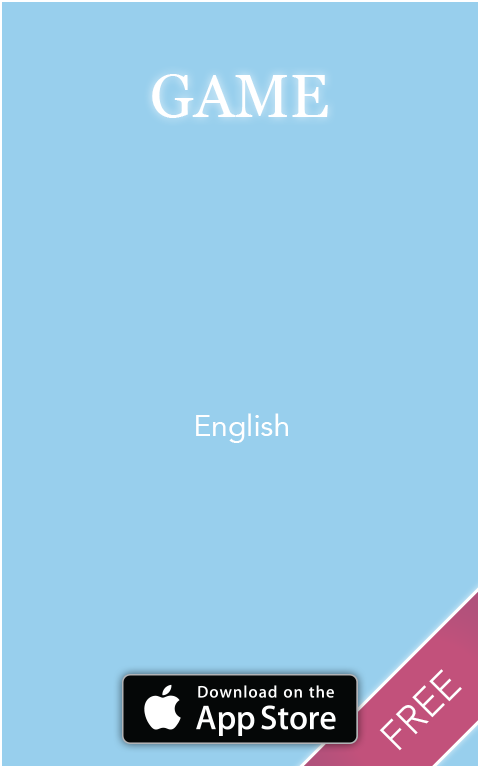
<style>
.page{position:relative;width:480px;height:768px;background:#98cfed}
.page>*{position:absolute;margin:0}
.t1{font:60px "Georgia";color:#ffffff}
.t2{font:30px "Avenir-Roman";color:#ffffff}
.t3{font:40px "Avenir-Light";color:#ffffff}
</style>
<div class="page">
<p class="t1" style="left:152px;top:74px;width:176px;height:44px">GAME</p>
<p class="t2" style="left:196px;top:413px;width:92px;height:30px">English</p>
<p class="t3" style="left:379px;top:669px;width:83px;height:82px;rotate:-45deg">FREE</p>
</div>
